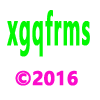
<style>
.page{position:relative;width:100px;height:100px;background:#ffffff}
.page>*{position:absolute;margin:0}
.t1{font:42.5px "MicrosoftYaHei-Bold";color:#02f702;font-weight:bold;scale:0.43 1}
.t2{font:18px "MicrosoftYaHei-Bold";color:#fb0ccb;font-weight:bold}
</style>
<div class="page">
<p class="t1" style="left:7px;top:10px;width:83px;height:47px">xgqfrms</p>
<p class="t2" style="left:15px;top:70px;width:63px;height:16px">©2016</p>
</div>
